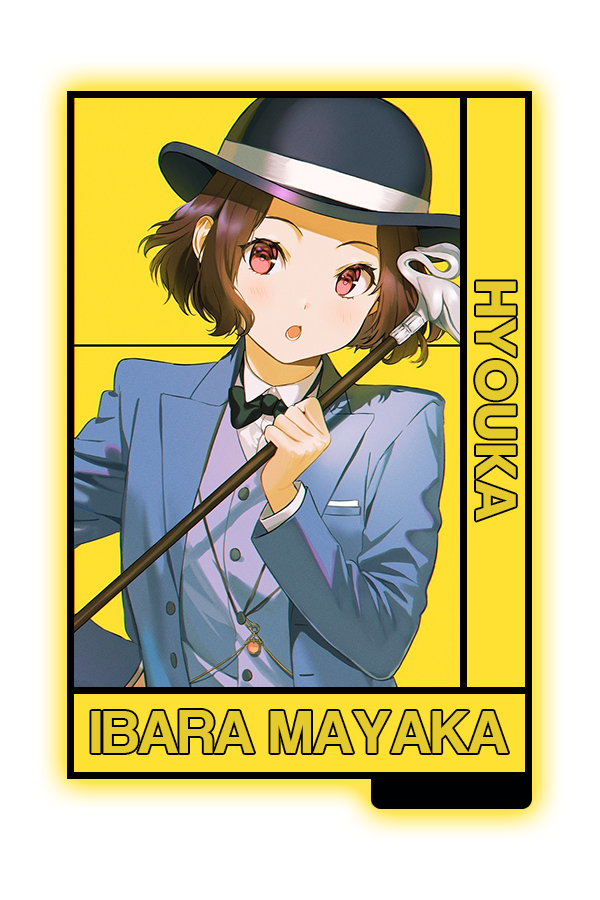
<style>
.page{position:relative;width:600px;height:900px;background:#ffffff}
.page>*{position:absolute;margin:0}
.t1{font:62.5px "CoolveticaRg-Regular";color:#e5ca2b}
</style>
<div class="page">
<p class="t1" style="left:91px;top:710px;width:417px;height:43px">IBARA MAYAKA</p>
</div>
